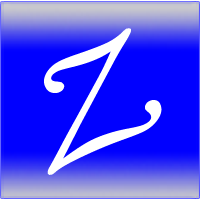
<style>
.page{position:relative;width:200px;height:200px;background:#0000ff}
.page>*{position:absolute;margin:0}
.t1{font:163.4px "MonotypeCorsiva";color:#ffffff;scale:1.38 1}
</style>
<div class="page">
<p class="t1" style="left:44px;top:28px;width:118px;height:147px;rotate:-25deg">Z</p>
</div>
